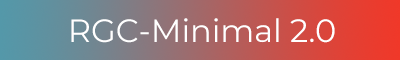
<style>
.page{position:relative;width:400px;height:60px}
.page>*{position:absolute;margin:0}
.t1{font:32px "Montserrat-Regular";color:#ffffff}
</style>
<div class="page">
<p class="t1" style="left:71px;top:18px;width:264px;height:25px">RGC-Minimal 2.0</p>
</div>
